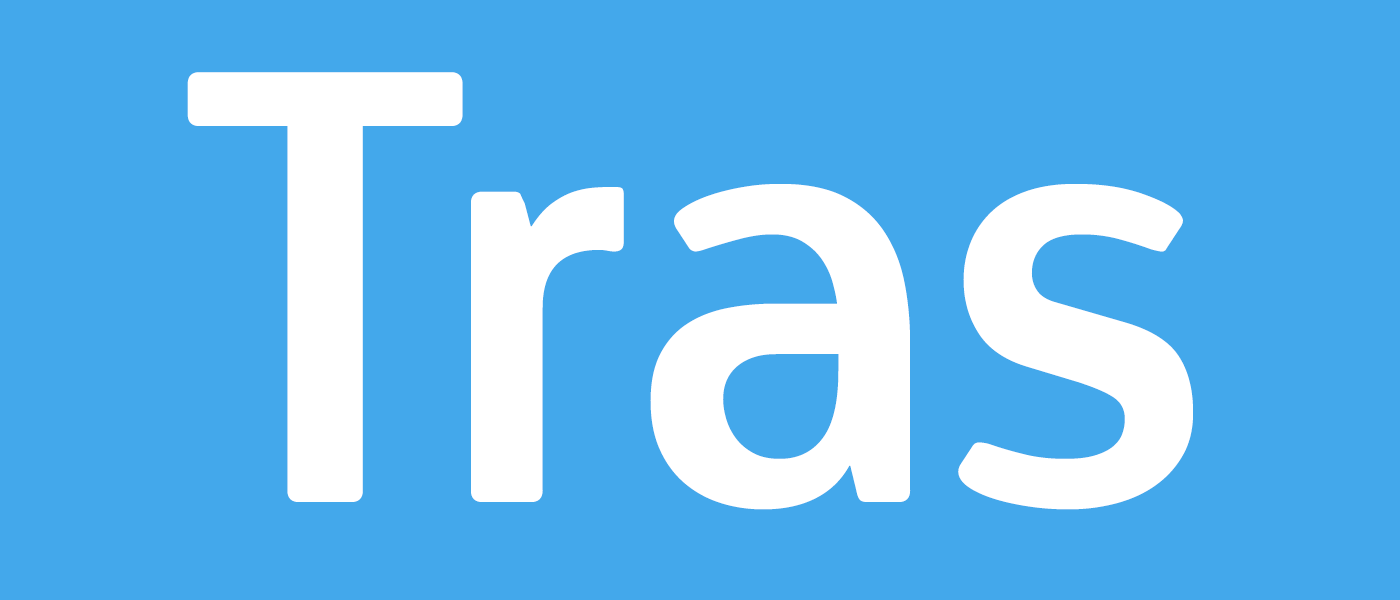
<style>
.page{position:relative;width:1400px;height:600px;background:#43a8eb}
.page>*{position:absolute;margin:0}
.t1{font:596.7px "Designosaur";color:#ffffff}
</style>
<div class="page">
<p class="t1" style="left:187px;top:72px;width:1006px;height:438px">Tras</p>
</div>
